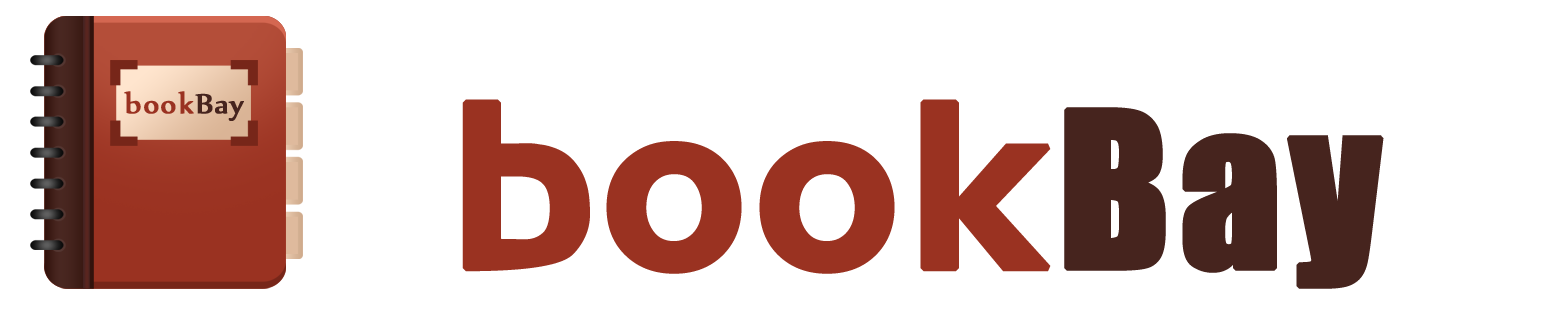
<style>
.page{position:relative;width:1564px;height:315px;background:#ffffff}
.page>*{position:absolute;margin:0}
.t1{font:32.9px "Nyala-Regular";letter-spacing:0.025em;color:#9a3221;font-weight:bold;scale:1.07 1}
.t2{font:32.9px "Nyala-Regular";letter-spacing:0.025em;color:#46241e;font-weight:bold;scale:1.07 1}
.t3{font:230px "Newtown";letter-spacing:0.025em;color:#9a3221;font-weight:bold}
.t4{font:200px "Impact";letter-spacing:0.025em;color:#46241e;font-weight:bold}
</style>
<div class="page">
<p class="t1" style="left:124px;top:91px;width:120px;height:30px">book<span class="t2">Bay</span></p>
<p class="t3" style="left:462px;top:99px;width:922px;height:190px">book<span class="t4">Bay</span></p>
</div>
